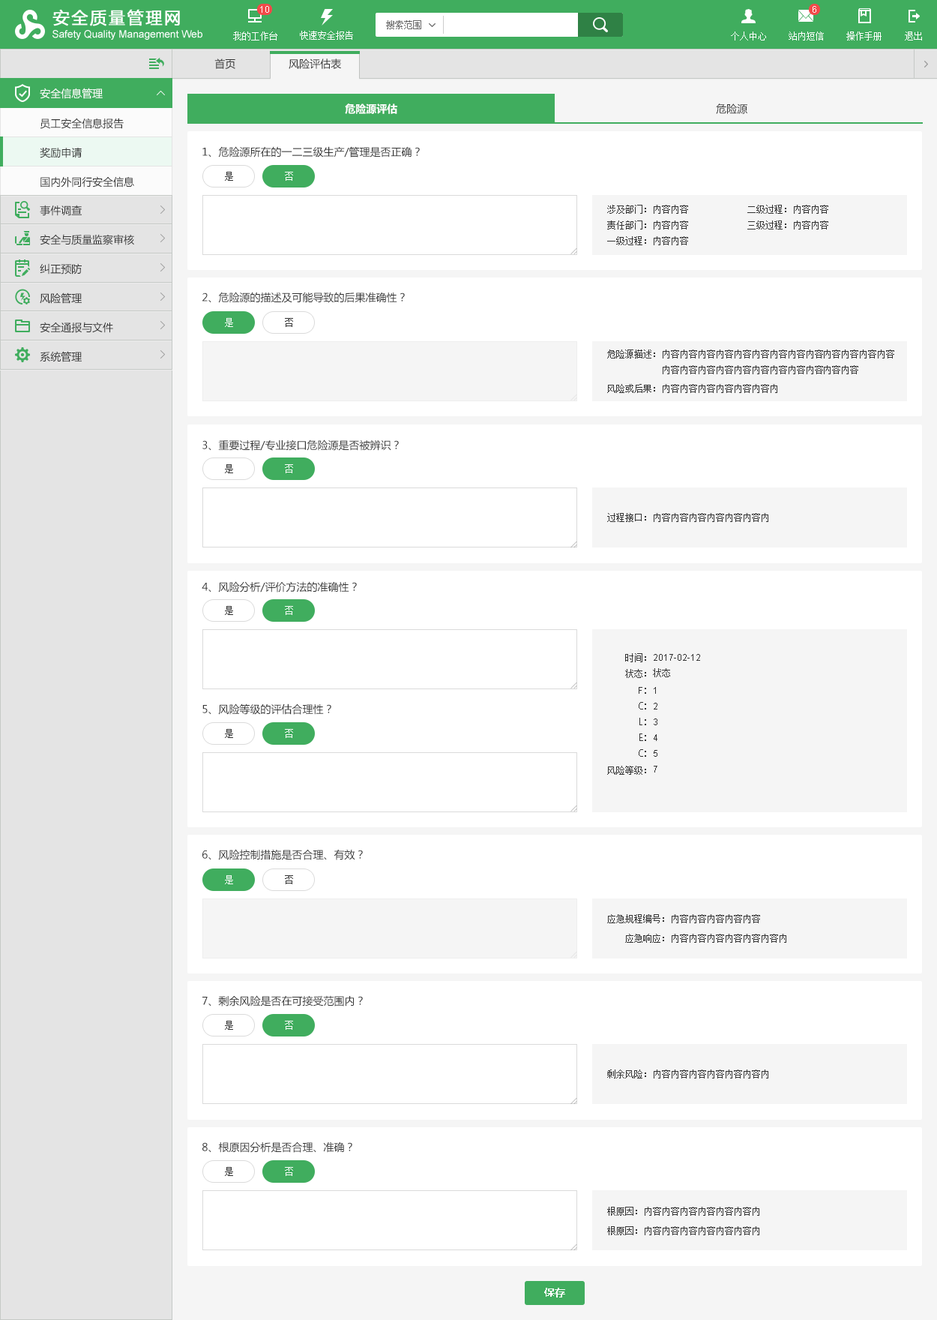
<style>
.page{position:relative;width:937px;height:1320px;background:#ffffff}
.page>*{position:absolute;margin:0}
.t1{font:10.5px "MicrosoftYaHei";color:#333333}
.t2{font:10.5px "MicrosoftYaHei";color:#ffffff}
.t3{font:10.5px "MicrosoftYaHei-Bold";color:#ffffff}
.t4{font:10.5px/29.2px "MicrosoftYaHei";color:#333333}
.t5{font:9px "SimSun";color:#333333}
.t6{font:9px "SimSun";color:#ffffff}
.t7{font:9px "ArialMT";color:#333333}
.t8{font:9px "AdobeHeitiStd-Regular";color:#333333}
</style>
<div class="page">
<p class="t1" style="left:214px;top:58px;width:21px;height:11px">首页</p>
<p class="t1" style="left:289px;top:58px;width:52px;height:11px">风险评估表</p>
<p class="t2" style="left:40px;top:88px;width:63px;height:11px">安全信息管理</p>
<p class="t3" style="left:345px;top:103px;width:52px;height:11px">危险源评估</p>
<p class="t1" style="left:716px;top:103px;width:32px;height:11px">危险源</p>
<p class="t4" style="left:40px;top:118px;width:94px;height:69px">员工安全信息报告<br>奖励申请<br>国内外同行安全信息</p>
<p class="t1" style="left:202px;top:146px;width:218px;height:11px">1、危险源所在的一二三级生产/管理是否正确？</p>
<p class="t5" style="left:225px;top:172px;width:8px;height:9px">是</p>
<p class="t6" style="left:285px;top:172px;width:8px;height:9px">否</p>
<p class="t4" style="left:40px;top:205px;width:94px;height:157px">事件调查<br>安全与质量监察审核<br>纠正预防<br>风险管理<br>安全通报与文件<br>系统管理</p>
<p class="t5" style="left:607px;top:205px;width:39px;height:40px;text-align:right">涉及部门：<br>责任部门：<br>一级过程：</p>
<p class="t5" style="left:654px;top:205px;width:34px;height:40px;text-align:right">内容内容<br>内容内容<br>内容内容</p>
<p class="t5" style="left:748px;top:205px;width:39px;height:24px;text-align:right">二级过程：<br>三级过程：</p>
<p class="t5" style="left:794px;top:205px;width:35px;height:24px;text-align:right">内容内容<br>内容内容</p>
<p class="t1" style="left:202px;top:292px;width:203px;height:11px">2、危险源的描述及可能导致的后果准确性？</p>
<p class="t6" style="left:225px;top:318px;width:8px;height:9px">是</p>
<p class="t5" style="left:285px;top:318px;width:8px;height:9px">否</p>
<p class="t5" style="left:607px;top:349px;width:48px;height:9px">危险源描述：</p>
<p class="t5" style="left:663px;top:349px;width:232px;height:25px">内容内容内容内容内容内容内容内容内容内容内容内容内容<br>内容内容内容内容内容内容内容内容内容内容内容</p>
<p class="t5" style="left:607px;top:384px;width:48px;height:9px">风险或后果：</p>
<p class="t5" style="left:663px;top:384px;width:115px;height:9px">内容内容内容内容内容内容内</p>
<p class="t1" style="left:202px;top:439px;width:197px;height:12px">3、重要过程/专业接口危险源是否被辨识？</p>
<p class="t5" style="left:225px;top:464px;width:8px;height:9px">是</p>
<p class="t6" style="left:285px;top:464px;width:8px;height:9px">否</p>
<p class="t5" style="left:607px;top:513px;width:39px;height:9px">过程接口：</p>
<p class="t5" style="left:654px;top:513px;width:115px;height:9px">内容内容内容内容内容内容内</p>
<p class="t1" style="left:202px;top:581px;width:155px;height:11px">4、风险分析/评价方法的准确性？</p>
<p class="t5" style="left:225px;top:606px;width:8px;height:9px">是</p>
<p class="t6" style="left:285px;top:606px;width:8px;height:9px">否</p>
<p class="t5" style="left:625px;top:653px;width:21px;height:25px;text-align:right">时间：<br>状态：</p>
<p class="t7" style="left:654px;top:654px;width:46px;height:7px">2017-02-12</p>
<p class="t5" style="left:653px;top:668px;width:17px;height:9px">状态</p>
<p class="t8" style="left:639px;top:687px;width:7px;height:70px;text-align:right"><span class="t7">F</span>：<br>C：<br>L：<br>E：<br>C：</p>
<p class="t7" style="left:654px;top:687px;width:4px;height:85px;text-align:right">1<br>2<br>3<br>4<br>5<br>7</p>
<p class="t1" style="left:202px;top:703px;width:129px;height:12px">5、风险等级的评估合理性？</p>
<p class="t5" style="left:225px;top:729px;width:8px;height:9px">是</p>
<p class="t6" style="left:285px;top:729px;width:8px;height:9px">否</p>
<p class="t5" style="left:607px;top:766px;width:39px;height:9px">风险等级：</p>
<p class="t1" style="left:202px;top:849px;width:161px;height:11px">6、风险控制措施是否合理、有效？</p>
<p class="t6" style="left:225px;top:875px;width:8px;height:9px">是</p>
<p class="t5" style="left:285px;top:875px;width:8px;height:9px">否</p>
<p class="t5" style="left:607px;top:914px;width:57px;height:9px">应急规程编号：</p>
<p class="t5" style="left:672px;top:914px;width:88px;height:9px">内容内容内容内容内容</p>
<p class="t5" style="left:625px;top:934px;width:39px;height:9px">应急响应：</p>
<p class="t5" style="left:672px;top:934px;width:115px;height:9px">内容内容内容内容内容内容内</p>
<p class="t1" style="left:202px;top:995px;width:161px;height:11px">7、剩余风险是否在可接受范围内？</p>
<p class="t5" style="left:225px;top:1021px;width:8px;height:9px">是</p>
<p class="t6" style="left:285px;top:1021px;width:8px;height:9px">否</p>
<p class="t5" style="left:607px;top:1069px;width:39px;height:9px">剩余风险：</p>
<p class="t5" style="left:654px;top:1069px;width:115px;height:9px">内容内容内容内容内容内容内</p>
<p class="t1" style="left:202px;top:1141px;width:150px;height:12px">8、根原因分析是否合理、准确？</p>
<p class="t5" style="left:225px;top:1167px;width:8px;height:9px">是</p>
<p class="t6" style="left:285px;top:1167px;width:8px;height:9px">否</p>
<p class="t5" style="left:607px;top:1207px;width:30px;height:9px">根原因：</p>
<p class="t5" style="left:645px;top:1207px;width:115px;height:9px">内容内容内容内容内容内容内</p>
<p class="t5" style="left:607px;top:1226px;width:30px;height:9px">根原因：</p>
<p class="t5" style="left:645px;top:1226px;width:115px;height:9px">内容内容内容内容内容内容内</p>
<p class="t3" style="left:544px;top:1288px;width:21px;height:9px">保存</p>
</div>
